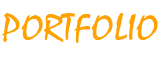
<style>
.page{position:relative;width:160px;height:60px;background:#ffffff}
.page>*{position:absolute;margin:0}
.t1{font:37.6px "Mistral";color:#ffa200;scale:1.11 1}
</style>
<div class="page">
<p class="t1" style="left:2px;top:13px;width:156px;height:30px">PORTFOLIO</p>
</div>
